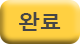
<style>
.page{position:relative;width:80px;height:44px;background:#ffd041}
.page>*{position:absolute;margin:0}
.t1{font:21px "MalgunGothicBold";color:#474747}
</style>
<div class="page">
<p class="t1" style="left:19px;top:12px;width:42px;height:19px">완료</p>
</div>
